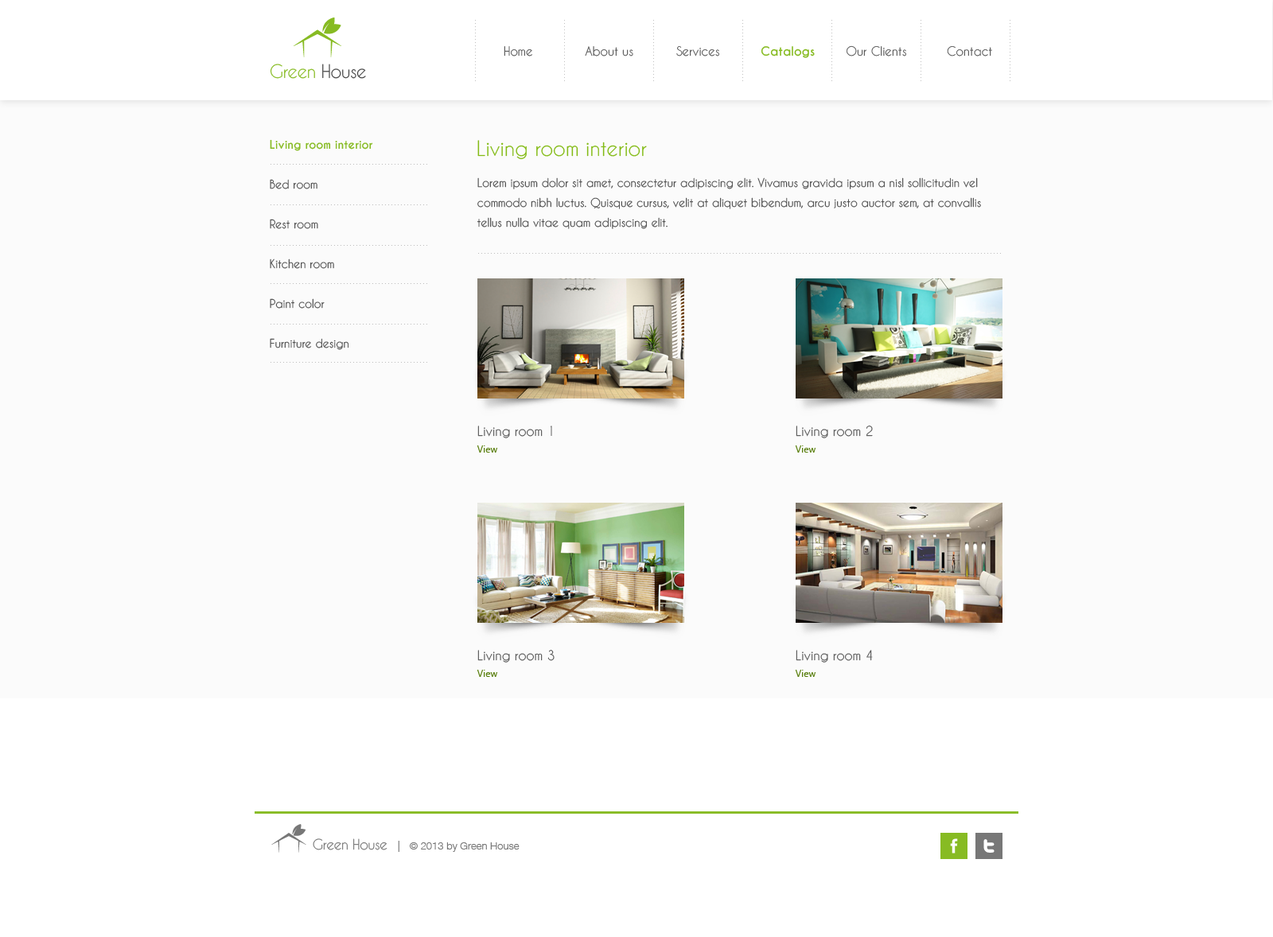
<style>
.page{position:relative;width:1273px;height:937px;background:#fbfbfb}
.page>*{position:absolute;margin:0}
.t1{font:11.9px "CaviarDreams";color:#555555}
.t2{font:11.9px "CaviarDreams-Bold";color:#87bb23}
.t3{font:17.5px "CaviarDreams";letter-spacing:-0.025em;color:#87bb23}
.t4{font:17.5px "CaviarDreams";letter-spacing:-0.025em;color:#444444}
.t5{font:11.1px/39.8px "CaviarDreams";color:#555555}
.t6{font:11.1px/39.8px "CaviarDreams-Bold";color:#87bb23}
.t7{font:19.9px "CaviarDreams";color:#83bb15}
.t8{font:11.1px/19.9px "CaviarDreams";color:#555555}
.t9{font:12.7px/16.7px "CaviarDreams";color:#555555}
.t10{font:9.5px/16.7px "SegoeUI";color:#577d0a}
.t11{font:13.5px "CaviarDreams";letter-spacing:-0.025em;color:#777777}
.t12{font:10.3px "HelveticaNeueW02-45Light";color:#777777}
.t13{font:11.1px "HelveticaNeueW02-45Light";color:#777777}
</style>
<div class="page">
<p class="t1" style="left:503px;top:45px;width:489px;height:13px">Home         About us           Services       <span class="t2">Catalogs   </span>Our Clients          Contact</p>
<p class="t3" style="left:270px;top:64px;width:96px;height:15px">Green <span class="t4">House</span></p>
<p class="t5" style="left:270px;top:139px;width:103px;height:211px"><span class="t6">Living room interior<br></span>Bed room<br>Rest room<br>Kitchen room<br>Paint color<br>Furniture design</p>
<p class="t7" style="left:477px;top:140px;width:170px;height:20px">Living room interior</p>
<p class="t8" style="left:477px;top:177px;width:504px;height:52px">Lorem ipsum dolor sit amet, consectetur adipiscing elit. Vivamus gravida ipsum a nisl sollicitudin vel commodo nibh luctus. Quisque cursus, velit at aliquet bibendum, arcu justo auctor sem, at convallis tellus nulla vitae quam adipiscing elit.</p>
<p class="t9" style="left:476px;top:426px;width:76px;height:27px">Living room 1<br><span class="t10">View</span></p>
<p class="t9" style="left:795px;top:426px;width:78px;height:27px">Living room 2<br><span class="t10">View</span></p>
<p class="t9" style="left:476px;top:650px;width:78px;height:27px">Living room 3<br><span class="t10">View</span></p>
<p class="t9" style="left:795px;top:650px;width:78px;height:27px">Living room 4<br><span class="t10">View</span></p>
<p class="t11" style="left:313px;top:838px;width:74px;height:12px">Green House</p>
<p class="t12" style="left:398px;top:841px;width:121px;height:11px"><span class="t13">|   </span>© 2013 by Green House</p>
</div>
